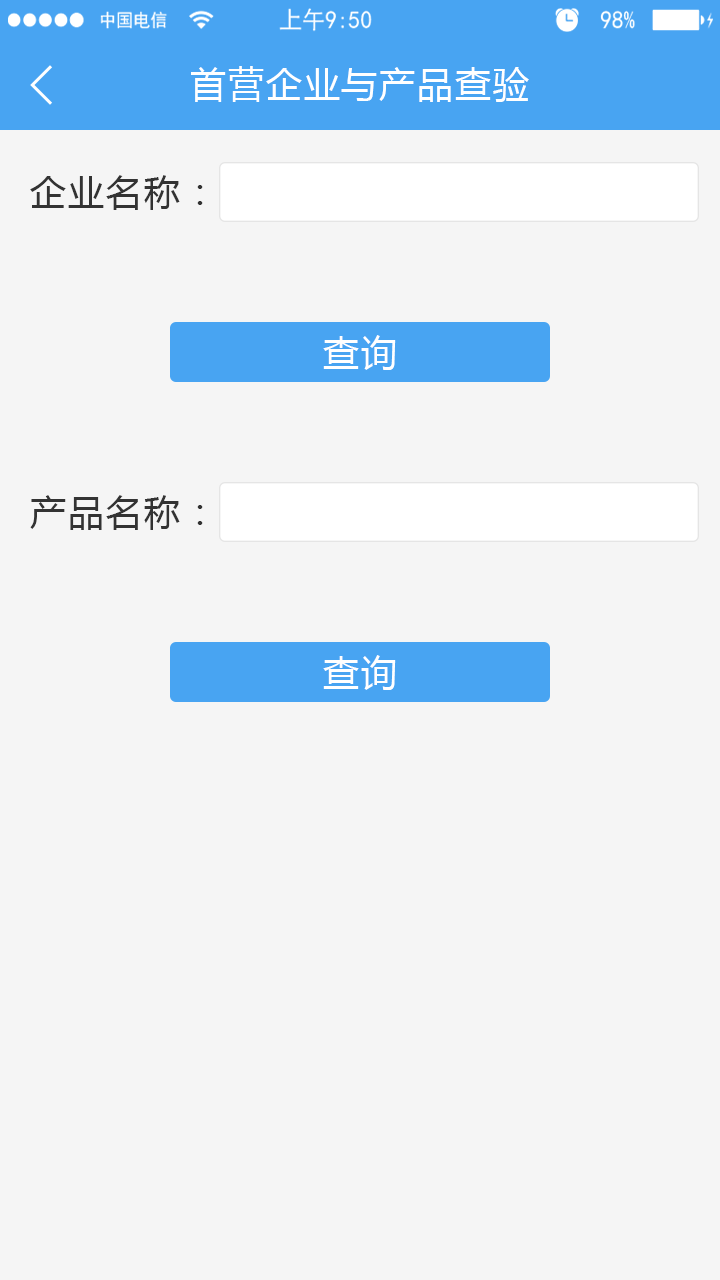
<style>
.page{position:relative;width:720px;height:1280px;background:#f5f5f5}
.page>*{position:absolute;margin:0}
.t1{font:36px "MicrosoftYaHei";letter-spacing:0.05em;color:#ffffff}
.t2{font:36px "MicrosoftYaHei";letter-spacing:0.05em;color:#333333}
</style>
<div class="page">
<p class="t1" style="left:191px;top:66px;width:338px;height:36px">首营企业与产品查验</p>
<p class="t2" style="left:30px;top:175px;width:173px;height:35px">企业名称：</p>
<p class="t1" style="left:323px;top:335px;width:73px;height:35px">查询</p>
<p class="t2" style="left:30px;top:495px;width:173px;height:35px">产品名称：</p>
<p class="t1" style="left:323px;top:655px;width:73px;height:35px">查询</p>
</div>
